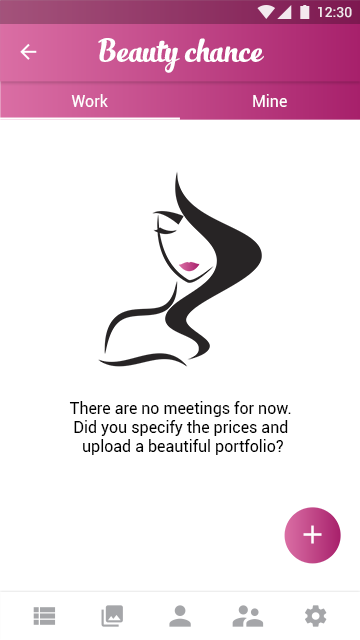
<style>
.page{position:relative;width:360px;height:640px;background:#ffffff}
.page>*{position:absolute;margin:0}
.t1{font:14px "Roboto-Medium";color:#ffffff}
.t2{font:24px "SlimTony-Italic";color:#ffffff}
.t3{font:16px "Roboto-Regular";color:#ffffff}
.t4{font:16px "Roboto-Regular";color:#000000}
</style>
<div class="page">
<p class="t1" style="left:318px;top:7px;width:34px;height:11px">12:30</p>
<p class="t2" style="left:98px;top:38px;width:166px;height:35px">Beauty chance</p>
<p class="t3" style="left:71px;top:94px;width:37px;height:13px">Work</p>
<p class="t3" style="left:253px;top:94px;width:34px;height:13px">Mine</p>
<p class="t4" style="left:69px;top:401px;width:222px;height:54px;text-align:center">There are no meetings for now. <br>Did you specify the prices and <br>upload a beautiful portfolio?</p>
</div>
